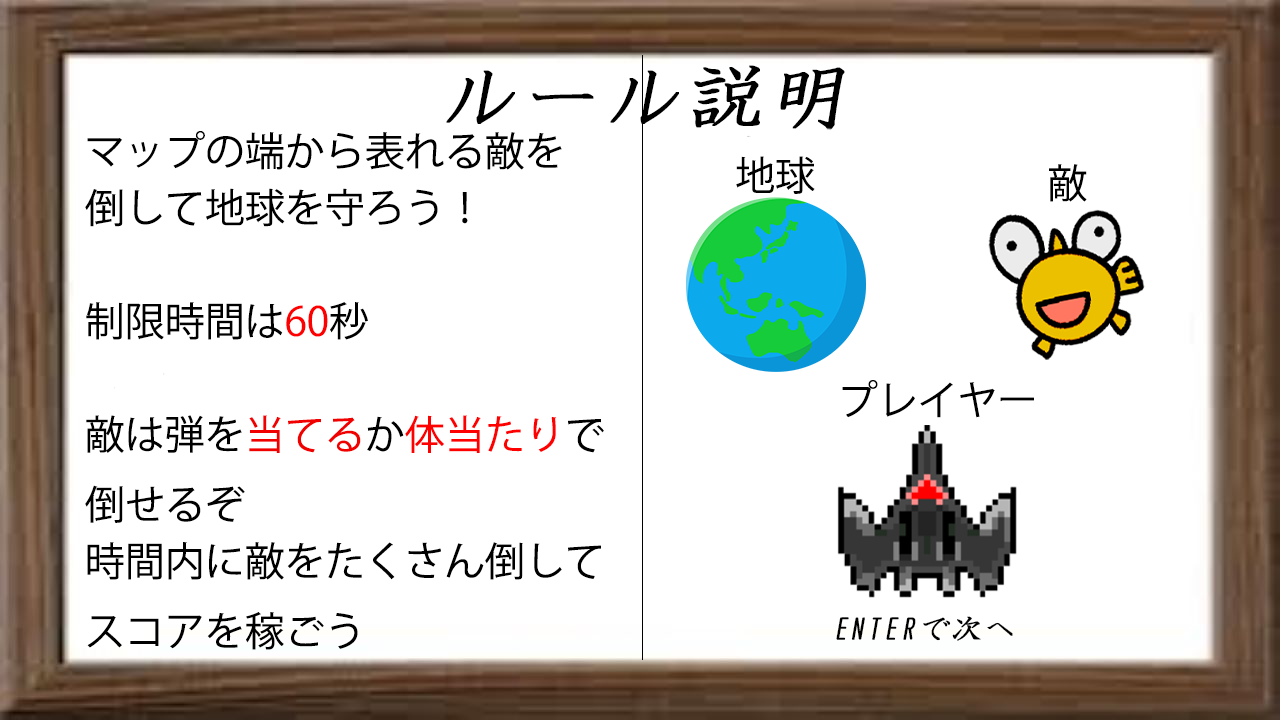
<style>
.page{position:relative;width:1280px;height:720px;background:#ffffff}
.page>*{position:absolute;margin:0}
.t1{font:40px "KozGoPr6N-Regular";color:#000000}
.t2{font:40px "KozGoPr6N-Regular";color:#ff0000}
.t3{font:40px "KozGoPr6N-Regular";color:#f10000}
</style>
<div class="page">
<p class="t1" style="left:85px;top:131px;width:519px;height:519px">マップの端から表れる敵を<br>倒して地球を守ろう！<br><br>制限時間は<span class="t2">60</span>秒<br><br>敵は弾を<span class="t3">当てる</span>か<span class="t2">体当たり</span>で倒せるぞ<br>時間内に敵をたくさん倒してスコアを稼ごう</p>
<p class="t1" style="left:736px;top:156px;width:79px;height:38px">地球</p>
<p class="t1" style="left:1049px;top:164px;width:38px;height:38px">敵</p>
<p class="t1" style="left:842px;top:380px;width:192px;height:38px">プレイヤー</p>
</div>
